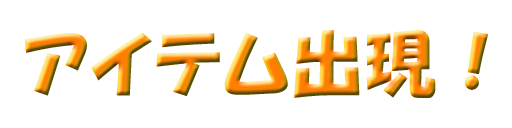
<style>
.page{position:relative;width:512px;height:128px;background:#ffffff}
.page>*{position:absolute;margin:0}
.t1{font:72px "HGPSoeiKakupoptai";letter-spacing:0.025em}
</style>
<div class="page">
<p class="t1" style="left:24px;top:30px;width:465px;height:68px">アイテム出現！</p>
</div>
